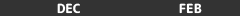
<style>
.page{position:relative;width:240px;height:16px;background:#333333}
.page>*{position:absolute;margin:0}
.t1{font:12.5px "RoundedMplus1c-ExtraBold";color:#ffffff}
</style>
<div class="page">
<p class="t1" style="left:57px;top:3px;width:23px;height:11px">DEC</p>
<p class="t1" style="left:179px;top:3px;width:23px;height:11px">FEB</p>
</div>
